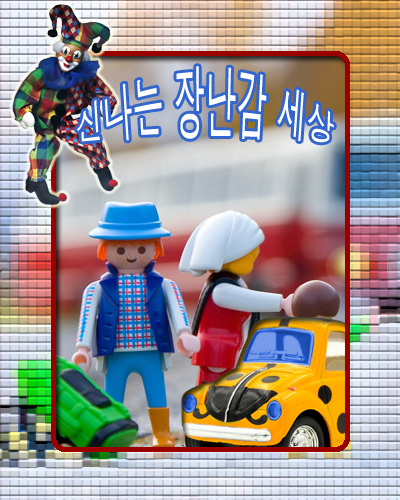
<style>
.page{position:relative;width:400px;height:500px}
.page>*{position:absolute;margin:0}
.t1{font:30px/50px "Dotum";color:#ffffff}
</style>
<div class="page">
<p class="t1" style="left:76px;top:66px;width:258px;height:77px;text-align:center">신나는 장난감 세상</p>
</div>
